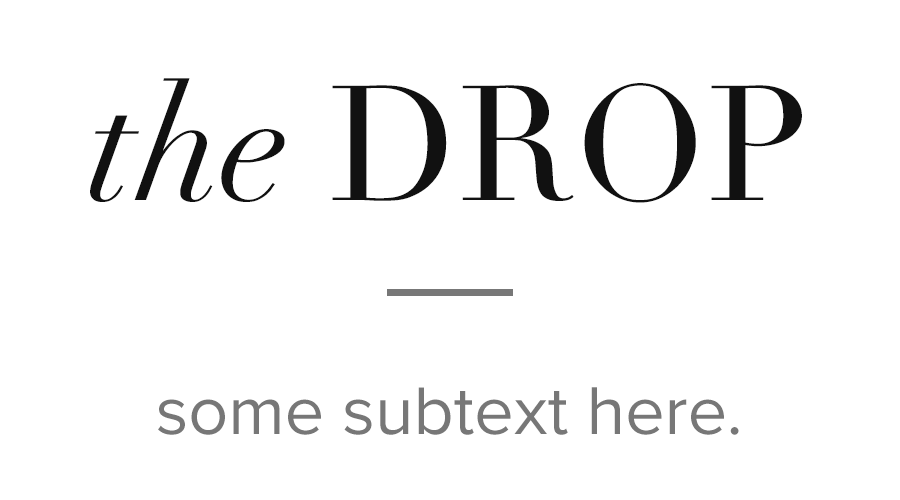
<style>
.page{position:relative;width:900px;height:500px;background:#ffffff}
.page>*{position:absolute;margin:0}
.t1{font:160px "Didot";color:#111111;text-transform:uppercase}
.t2{font:160px "Didot-Italic";color:#111111}
.t3{font:70px "ProximaNova-Regular";color:#777777}
</style>
<div class="page">
<p class="t1" style="left:90px;top:78px;width:712px;height:125px"><span class="t2">the </span>Drop</p>
<p class="t3" style="left:158px;top:387px;width:581px;height:48px">some subtext here.</p>
</div>
